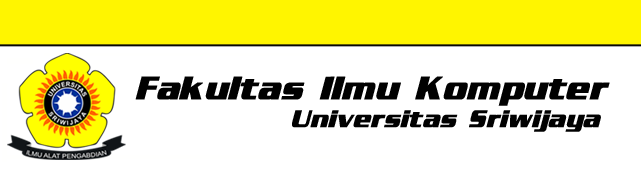
<style>
.page{position:relative;width:641px;height:169px;background:#ffffff}
.page>*{position:absolute;margin:0}
.t1{font:32px "EnterSansmanBoldItalic";color:#010101;font-weight:bold}
.t2{font:24px "EnterSansmanBoldItalic";color:#010101;font-weight:bold}
</style>
<div class="page">
<p class="t1" style="left:135px;top:76px;width:475px;height:30px">Fakultas Ilmu Komputer</p>
<p class="t2" style="left:292px;top:110px;width:309px;height:22px">Universitas Sriwijaya</p>
</div>
